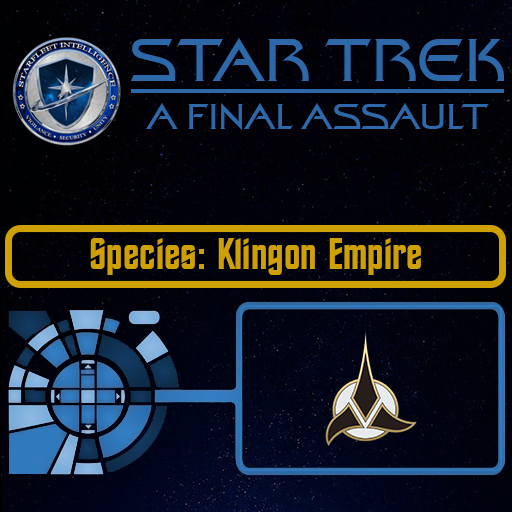
<style>
.page{position:relative;width:512px;height:512px}
.page>*{position:absolute;margin:0}
.t1{font:60px "StarTrekFilmBT-Regular";color:#2d68a9}
.t2{font:36px "StarTrekFilmBT-Regular";color:#2d68a9}
.t3{font:44px "StarTrekBT-Regular";color:#cfa001}
</style>
<div class="page">
<p class="t1" style="left:131px;top:38px;width:373px;height:43px">STAR TREK</p>
<p class="t2" style="left:146px;top:103px;width:343px;height:27px">A FINAL ASSAULT</p>
<p class="t3" style="left:90px;top:238px;width:331px;height:37px">Species: Klingon Empire</p>
</div>
